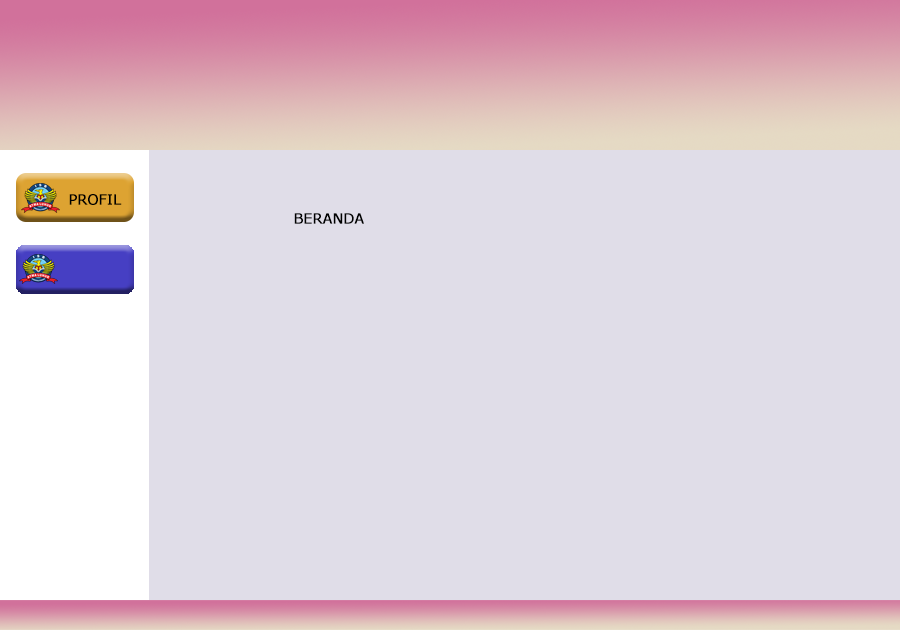
<style>
.page{position:relative;width:900px;height:630px;background:#e0dde8}
.page>*{position:absolute;margin:0}
.t1{font:13.9px "Verdana";color:#000000;font-weight:bold}
</style>
<div class="page">
<p class="t1" style="left:69px;top:194px;width:53px;height:11px">PROFIL</p>
<p class="t1" style="left:294px;top:213px;width:70px;height:11px">BERANDA</p>
</div>
